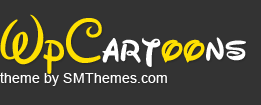
<style>
.page{position:relative;width:261px;height:105px;background:#333333}
.page>*{position:absolute;margin:0}
.t1{font:14.4px/22px "ArialMT";color:#ffffff}
.t2{font:60px/22px "Waltograph";color:#ffe001}
.t3{font:60px/22px "Waltograph";color:#ffffff}
</style>
<div class="page">
<p class="t1" style="left:0px;top:14px;width:246px;height:72px"><span class="t2">WpC</span><span class="t3">art</span><span class="t2">oo</span><span class="t3">ns<br></span>theme by SMThemes.com</p>
</div>
